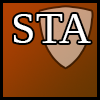
<style>
.page{position:relative;width:100px;height:100px}
.page>*{position:absolute;margin:0}
.t1{font:44px "LiberationSerif";color:#ffffff}
</style>
<div class="page">
<p class="t1" style="left:14px;top:14px;width:77px;height:29px">STA</p>
</div>
